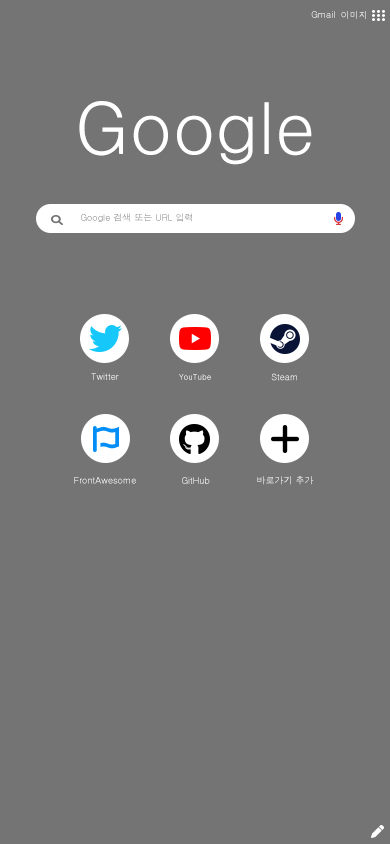
<style>
.page{position:relative;width:390px;height:844px;background:#747474}
.page>*{position:absolute;margin:0}
.t1{font:9px "Dotum"}
.t2{font:72px "Dotum";color:#ffffff}
.t3{font:8px "Dotum"}
.t4{font:9px "Dotum";color:#ffffff}
</style>
<div class="page">
<p class="t1" style="left:311px;top:11px;width:24px;height:7px">Gmail</p>
<p class="t1" style="left:341px;top:11px;width:25px;height:8px">이미지</p>
<p class="t2" style="left:79px;top:101px;width:233px;height:64px">Google</p>
<p class="t1" style="left:81px;top:213px;width:111px;height:9px">Google 검색 또는 URL 입력</p>
<p class="t1" style="left:91px;top:373px;width:28px;height:7px">Twitter</p>
<p class="t3" style="left:179px;top:374px;width:32px;height:6px">YouTube</p>
<p class="t1" style="left:271px;top:373px;width:26px;height:8px">Steam</p>
<p class="t4" style="left:74px;top:477px;width:62px;height:7px">FrontAwesome</p>
<p class="t1" style="left:182px;top:477px;width:28px;height:7px">GitHub</p>
<p class="t1" style="left:257px;top:476px;width:57px;height:9px">바로가기 추가</p>
</div>
